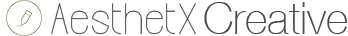
<style>
.page{position:relative;width:348px;height:36px;background:#ffffff}
.page>*{position:absolute;margin:0}
.t1{font:43.6px "Infinity";color:#4b4b4b;scale:1.05 1}
.t2{font:44px "HelveticaNeueCE-Thin";color:#4b4b4b;scale:0.97 1}
</style>
<div class="page">
<p class="t1" style="left:51px;top:3px;width:145px;height:32px">AesthetX</p>
<p class="t2" style="left:204px;top:2px;width:143px;height:32px">Creative</p>
</div>
